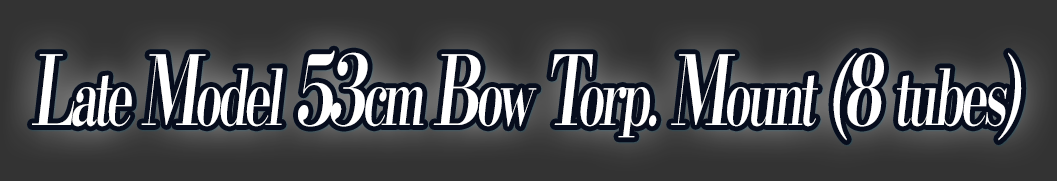
<style>
.page{position:relative;width:1057px;height:181px;background:#333333}
.page>*{position:absolute;margin:0}
.t1{font:76.8px "KochoStd-Heavy";letter-spacing:-0.08em;color:#ffffff;font-style:italic;scale:0.64 1}
.t2{font:96px "KochoStd-Heavy";letter-spacing:-0.08em;color:#ffffff;font-style:italic;scale:0.64 1}
</style>
<div class="page">
<p class="t1" style="left:32px;top:50px;width:990px;height:91px"><span class="t2">L</span>ate <span class="t2">M</span>odel<span class="t2"> 53</span>cm <span class="t2">B</span>ow<span class="t2"> T</span>orp.<span class="t2"> M</span>ount<span class="t2"> (8 </span>tubes<span class="t2">)</span></p>
</div>
